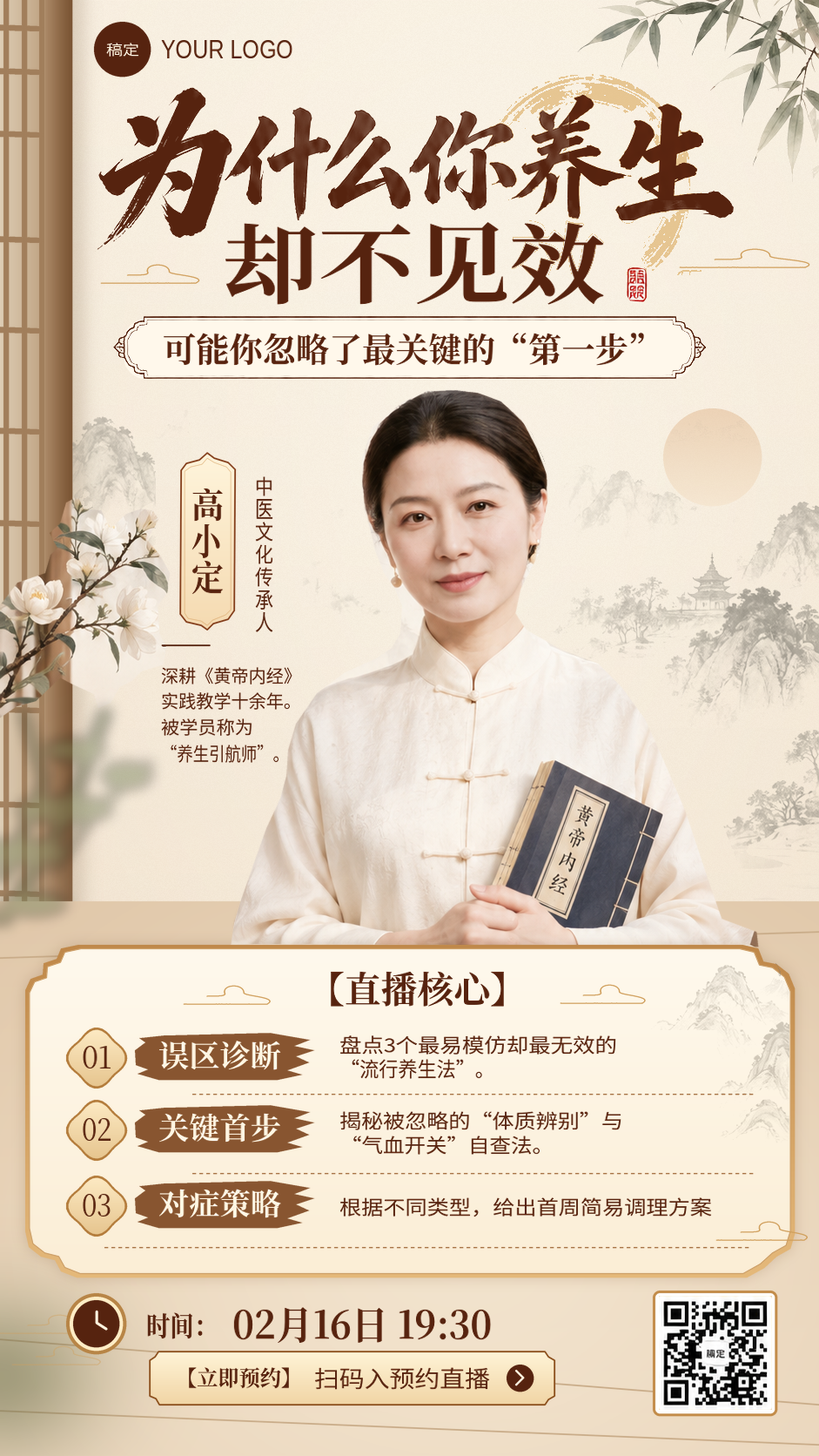
<style>
.page{position:relative;width:819px;height:1456px}
.page>*{position:absolute;margin:0}
.t1{font:26.5px "LiberationSans";color:#56230f;scale:0.82 1}
.t2{font:13.9px "NotoSansCJKsc-Regular";color:#fff4e0;scale:1.19 1}
.t3{font:86px "NotoSerifCJKsc-Bold";color:#56230f;scale:1.11 1}
.t4{font:33.1px "NotoSerifCJKsc-Bold";color:#56230f}
.t5{font:20px "NotoSansCJKsc-Regular";color:#56230f;scale:0.91 1}
.t6{font:34px "NotoSerifCJKsc-Bold";color:#56230f;scale:0.95 1}
.t7{font:22.8px "NotoSansCJKsc-Regular";color:#56230f;scale:0.8 1}
.t8{font:36.4px "NotoSerifCJKsc-Bold";color:#56230f;scale:0.81 1}
.t9{font:34.7px "NotoSerifCJKsc-Bold";color:#56230f;scale:0.93 1}
.t10{font:21.8px "NotoSansCJKsc-Regular";color:#56230f;scale:0.84 1}
.t11{font:17.4px "NotoSansCJKsc-Regular";color:#56230f}
.t12{font:17.4px "NotoSansCJKsc-Regular";color:#56230f;scale:1.06 1}
.t13{font:18.3px "NotoSansCJKsc-Regular";color:#56230f;scale:0.88 1}
.t14{font:36px "NotoSerifCJKsc-Bold";color:#56230f}
.t15{font:19.2px "NotoSansCJKsc-Regular";color:#56230f;scale:1.16 1}
.t16{font:31.1px "NotoSerifCJKsc-Regular";color:#56230f;scale:0.95 1}
.t17{font:29.6px "NotoSerifCJKsc-Bold";color:#fff4e0;scale:1.04 1}
.t18{font:20px "NotoSansCJKsc-Regular";color:#56230f;scale:0.96 1}
.t19{font:31.1px "NotoSerifCJKsc-Regular";color:#56230f;scale:0.87 1}
.t20{font:19.2px "NotoSansCJKsc-Regular";color:#56230f;scale:1.14 1}
.t21{font:19.2px "NotoSansCJKsc-Regular";color:#56230f;scale:1.11 1}
.t22{font:19.3px "NotoSansCJKsc-Regular";color:#56230f;scale:1.14 1}
.t23{font:27px "NotoSerifCJKsc-Bold";color:#56230f;scale:0.88 1}
.t24{font:38.2px "NotoSerifCJKsc-Bold";color:#56230f;scale:0.96 1}
.t25{font:21.1px "NotoSerifCJKsc-Bold";color:#56230f}
.t26{font:22.6px "NotoSansCJKsc-Regular";color:#56230f;scale:1.11 1}
</style>
<div class="page">
<p class="t1" style="left:161px;top:40px;width:132px;height:18px">YOUR LOGO</p>
<p class="t2" style="left:106px;top:43px;width:33px;height:14px">稿定</p>
<p class="t3" style="left:225px;top:222px;width:379px;height:83px">却不见效</p>
<p class="t4" style="left:163px;top:333px;width:481px;height:33px">可能你忽略了最关键的“第一步”</p>
<p class="t5" style="left:256px;top:476px;width:16px;height:20px">中</p>
<p class="t6" style="left:192px;top:488px;width:32px;height:33px">高</p>
<p class="t7" style="left:256px;top:499px;width:17px;height:20px">医</p>
<p class="t5" style="left:255px;top:521px;width:18px;height:20px">文</p>
<p class="t8" style="left:192px;top:524px;width:28px;height:34px">小</p>
<p class="t5" style="left:255px;top:544px;width:18px;height:20px">化</p>
<p class="t9" style="left:192px;top:561px;width:32px;height:34px">定</p>
<p class="t5" style="left:255px;top:567px;width:18px;height:20px">传</p>
<p class="t10" style="left:255px;top:589px;width:18px;height:20px">承</p>
<p class="t10" style="left:255px;top:612px;width:18px;height:20px">人</p>
<p class="t11" style="left:161px;top:667px;width:132px;height:17px">深耕《黄帝内经》</p>
<p class="t11" style="left:161px;top:692px;width:129px;height:18px">实践教学十余年。</p>
<p class="t12" style="left:161px;top:718px;width:91px;height:18px">被学员称为</p>
<p class="t13" style="left:171px;top:744px;width:108px;height:19px">“养生引航师”。</p>
<p class="t14" style="left:331px;top:971px;width:173px;height:36px">【直播核心】</p>
<p class="t15" style="left:340px;top:1035px;width:276px;height:19px">盘点3个最易模仿却最无效的</p>
<p class="t16" style="left:83px;top:1046px;width:28px;height:22px">01</p>
<p class="t17" style="left:158px;top:1040px;width:123px;height:30px">误区诊断</p>
<p class="t18" style="left:352px;top:1059px;width:130px;height:20px">“流行养生法”。</p>
<p class="t19" style="left:82px;top:1118px;width:29px;height:22px">02</p>
<p class="t17" style="left:158px;top:1113px;width:123px;height:29px">关键首步</p>
<p class="t20" style="left:340px;top:1111px;width:282px;height:19px">揭秘被忽略的“体质辨别”与</p>
<p class="t21" style="left:353px;top:1135px;width:187px;height:19px">“气血开关”自查法。</p>
<p class="t19" style="left:82px;top:1194px;width:29px;height:22px">03</p>
<p class="t17" style="left:158px;top:1188px;width:123px;height:30px">对症策略</p>
<p class="t22" style="left:340px;top:1197px;width:372px;height:20px">根据不同类型，给出首周简易调理方案</p>
<p class="t23" style="left:147px;top:1312px;width:56px;height:27px">时间：</p>
<p class="t24" style="left:233px;top:1307px;width:259px;height:36px">02月16日 19:30</p>
<p class="t25" style="left:189px;top:1367px;width:100px;height:22px">【立即预约】</p>
<p class="t26" style="left:314px;top:1367px;width:176px;height:22px">扫码入预约直播</p>
</div>
